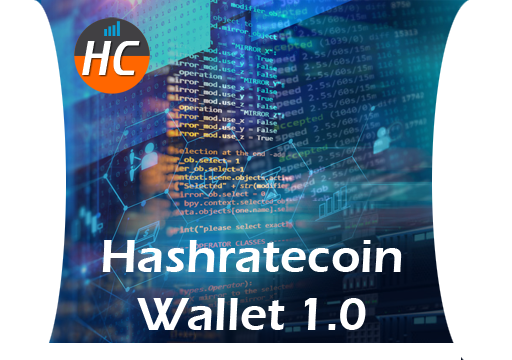
<style>
.page{position:relative;width:512px;height:360px;background:#ffffff}
.page>*{position:absolute;margin:0}
.t1{font:48px "ErasITC-Demi";color:#ffffff}
</style>
<div class="page">
<p class="t1" style="left:102px;top:240px;width:300px;height:90px;text-align:center">Hashratecoin<br>Wallet 1.0</p>
</div>
